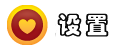
<style>
.page{position:relative;width:127px;height:51px;background:#ffffff}
.page>*{position:absolute;margin:0}
.t1{font:24px "STCaiyun";letter-spacing:0.12em;color:#0a0a0a;font-weight:bold}
</style>
<div class="page">
<p class="t1" style="left:57px;top:13px;width:52px;height:24px">设置</p>
</div>
